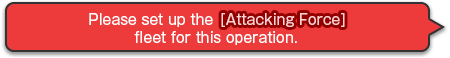
<style>
.page{position:relative;width:450px;height:58px;background:#ed3b3b}
.page>*{position:absolute;margin:0}
.t1{font:14px/18px "GothicMB101Pro-Regular"}
.t2{font:14px/18px "GothicMB101Pro-Regular";color:#ffffff}
.t3{font:14px/18px "GothicMB101Pro-Regular";color:#ffd3d3}
</style>
<div class="page">
<p class="t1" style="left:87px;top:13px;width:258px;height:32px;text-align:center">Please set up the  [Attacking Force]<br>for this operation.</p>
<p class="t2" style="left:89px;top:13px;width:253px;height:32px;text-align:center">Please set up the <span class="t3">[Attacking Force]<br></span>fleet for this operation.</p>
</div>
